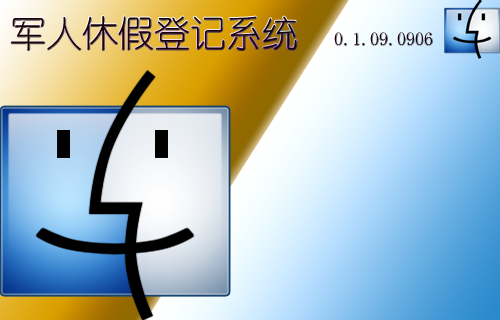
<style>
.page{position:relative;width:500px;height:320px}
.page>*{position:absolute;margin:0}
.t1{font:18px "YouYuan";color:#1a000b}
.t2{font:36px "YouYuan";color:#1a000b}
</style>
<div class="page">
<p class="t1" style="left:10px;top:16px;width:422px;height:35px"><span class="t2">军人休假登记系统  </span>0.1.09.0906</p>
</div>
